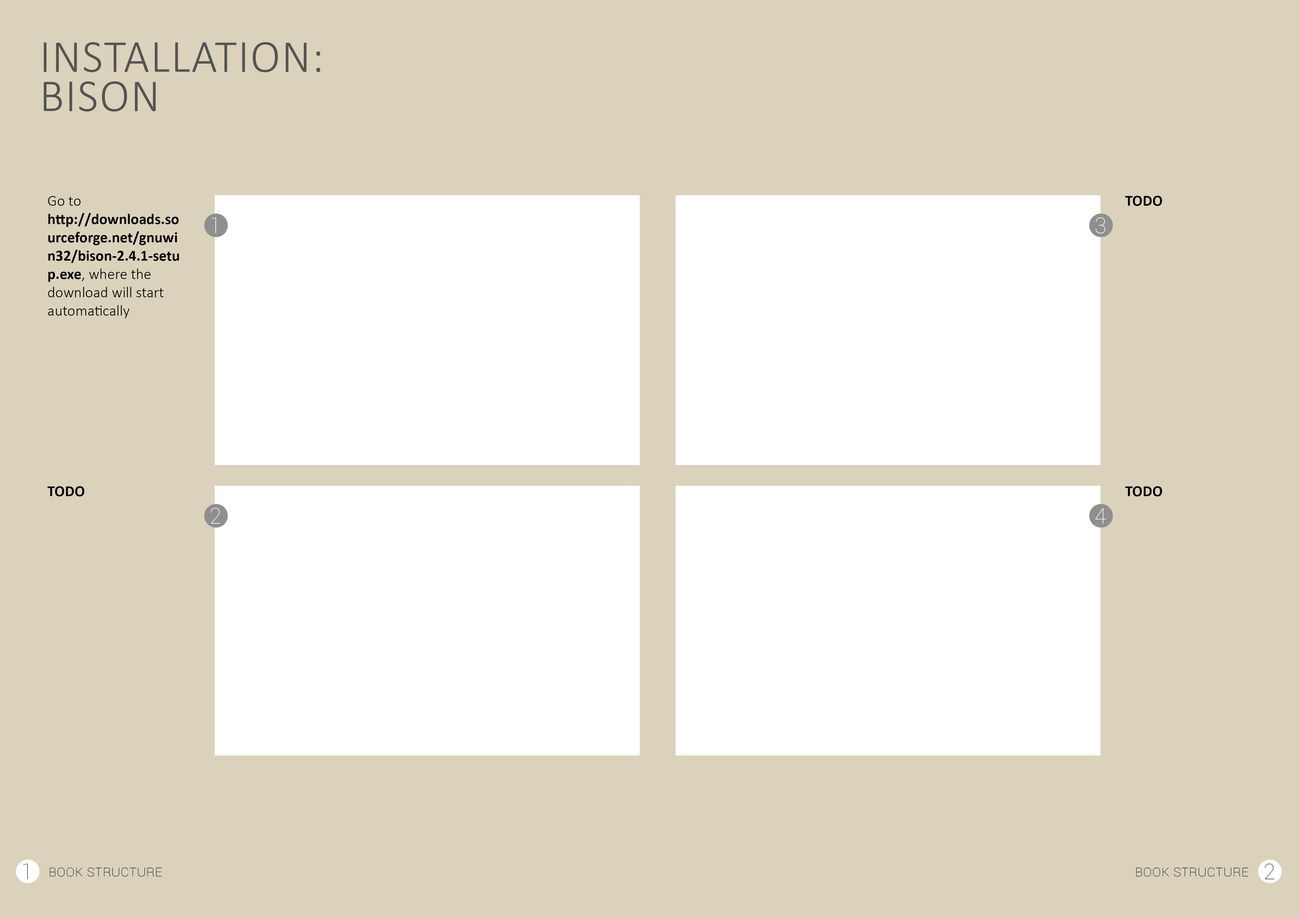
<style>
.page{position:relative;width:1299px;height:918px;background:#dad2bb}
.page>*{position:absolute;margin:0}
.t1{font:45.8px/39.3px "Calibri-Light";letter-spacing:0.025em;color:#545454;text-transform:uppercase}
.t2{font:15.3px "Calibri-Bold";color:#000000}
.t3{font:15.3px "Calibri-Light";color:#000000}
.t4{font:21.8px "Roboto-Thin";color:#ffffff}
.t5{font:21.8px "Roboto-Thin";color:#484848}
.t6{font:15.3px "Roboto-Thin";color:#000000;font-variant:small-caps}
</style>
<div class="page">
<p class="t1" style="left:44px;top:42px;width:276px;height:70px">installation:<br>bison</p>
<p class="t2" style="left:48px;top:196px;width:131px;height:122px"><span class="t3">Go to </span>http://downloads.sourceforge.net/gnuwin32/bison-2.4.1-setup.exe<span class="t3">, where the download will start automatically</span></p>
<p class="t2" style="left:1125px;top:196px;width:37px;height:10px">TODO</p>
<p class="t4" style="left:211px;top:218px;width:5px;height:15px">1</p>
<p class="t4" style="left:1095px;top:217px;width:10px;height:16px">3</p>
<p class="t2" style="left:47px;top:486px;width:37px;height:11px">TODO</p>
<p class="t2" style="left:1125px;top:486px;width:37px;height:11px">TODO</p>
<p class="t4" style="left:211px;top:508px;width:9px;height:16px">2</p>
<p class="t4" style="left:1095px;top:508px;width:11px;height:16px">4</p>
<p class="t5" style="left:23px;top:864px;width:5px;height:16px">1</p>
<p class="t6" style="left:50px;top:868px;width:112px;height:9px">Book structure</p>
<p class="t6" style="left:1136px;top:868px;width:112px;height:9px">Book structure</p>
<p class="t5" style="left:1264px;top:864px;width:10px;height:16px">2</p>
</div>
